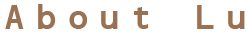
<style>
.page{position:relative;width:250px;height:35px;background:#ffffff}
.page>*{position:absolute;margin:0}
.t1{font:35px "OpticalBBold";letter-spacing:0.2em;color:#9a7153}
</style>
<div class="page">
<p class="t1" style="left:5px;top:4px;width:240px;height:25px">About Lu</p>
</div>
